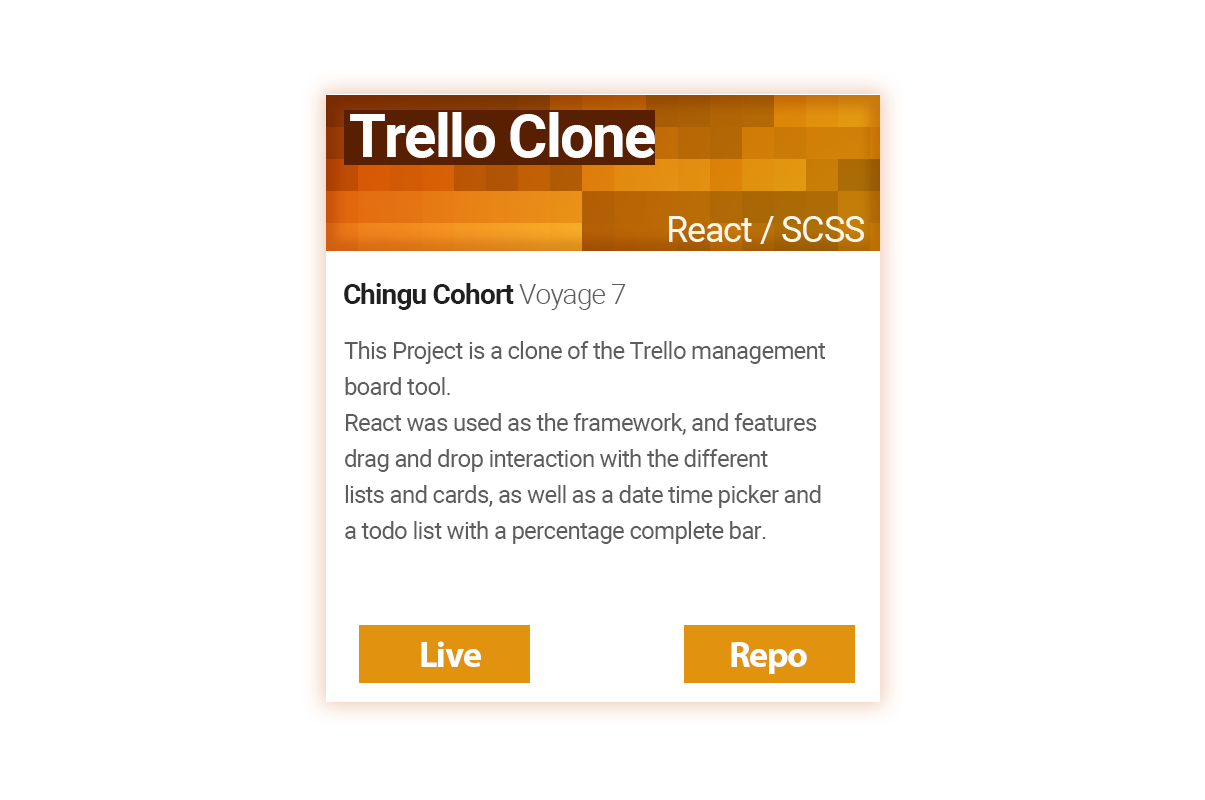
<style>
.page{position:relative;width:1205px;height:800px;background:#ffffff}
.page>*{position:absolute;margin:0}
.t1{font:60px "Roboto-Bold";letter-spacing:-0.03em;color:#fefefe}
.t2{font:36px "Roboto-Regular";letter-spacing:-0.03em;color:#fef6e8}
.t3{font:28px "Roboto-Bold";letter-spacing:-0.03em;color:#202020}
.t4{font:28px "Roboto-Light";letter-spacing:-0.03em;color:#5d5d5d}
.t5{font:24px/36px "Roboto-Regular";letter-spacing:-0.03em;color:#5d5d5d}
.t6{font:36px "MyriadPro-Bold";letter-spacing:-0.03em;color:#fefefe}
</style>
<div class="page">
<p class="t1" style="left:350px;top:112px;width:305px;height:46px">Trello Clone</p>
<p class="t2" style="left:669px;top:216px;width:195px;height:28px">React / SCSS</p>
<p class="t3" style="left:344px;top:283px;width:282px;height:27px">Chingu Cohort <span class="t4">Voyage 7</span></p>
<p class="t5" style="left:344px;top:341px;width:481px;height:203px">This Project is a clone of the Trello management<br>board tool.<br>React was used as the framework, and features<br>drag and drop interaction with the different<br>lists and cards, as well as a date time picker and<br>a todo list with a percentage complete bar.</p>
<p class="t6" style="left:421px;top:641px;width:60px;height:26px">Live</p>
<p class="t6" style="left:731px;top:642px;width:76px;height:32px">Repo</p>
</div>
